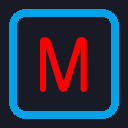
<style>
.page{position:relative;width:128px;height:128px;background:#181a26}
.page>*{position:absolute;margin:0}
.t1{font:80px "©M¥­²Ê¶ê";color:#ff0000}
</style>
<div class="page">
<p class="t1" style="left:40px;top:37px;width:47px;height:55px">M</p>
</div>
